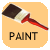
<style>
.page{position:relative;width:50px;height:50px;background:#ffcb80}
.page>*{position:absolute;margin:0}
.t1{font:11px "TrebuchetMS";color:#030303}
</style>
<div class="page">
<p class="t1" style="left:9px;top:32px;width:29px;height:8px">PAINT</p>
</div>
